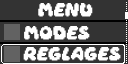
<style>
.page{position:relative;width:128px;height:64px;background:#333333}
.page>*{position:absolute;margin:0}
.t1{font:12px "Daydream";color:#ffffff}
</style>
<div class="page">
<p class="t1" style="left:38px;top:3px;width:55px;height:14px">Menu</p>
<p class="t1" style="left:23px;top:47px;width:98px;height:14px">Reglages</p>
</div>
